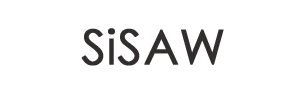
<style>
.page{position:relative;width:300px;height:100px;background:#ffffff}
.page>*{position:absolute;margin:0}
.t1{font:48px "CenturyGothic";color:#322e2e;font-weight:bold}
</style>
<div class="page">
<p class="t1" style="left:81px;top:28px;width:143px;height:38px">SiSAW</p>
</div>
